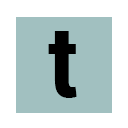
<style>
.page{position:relative;width:128px;height:128px;background:#a1c0c0}
.page>*{position:absolute;margin:0}
.t1{font:100px "Roboto-BoldCondensed";color:#000000}
</style>
<div class="page">
<p class="t1" style="left:48px;top:31px;width:29px;height:67px">t</p>
</div>
